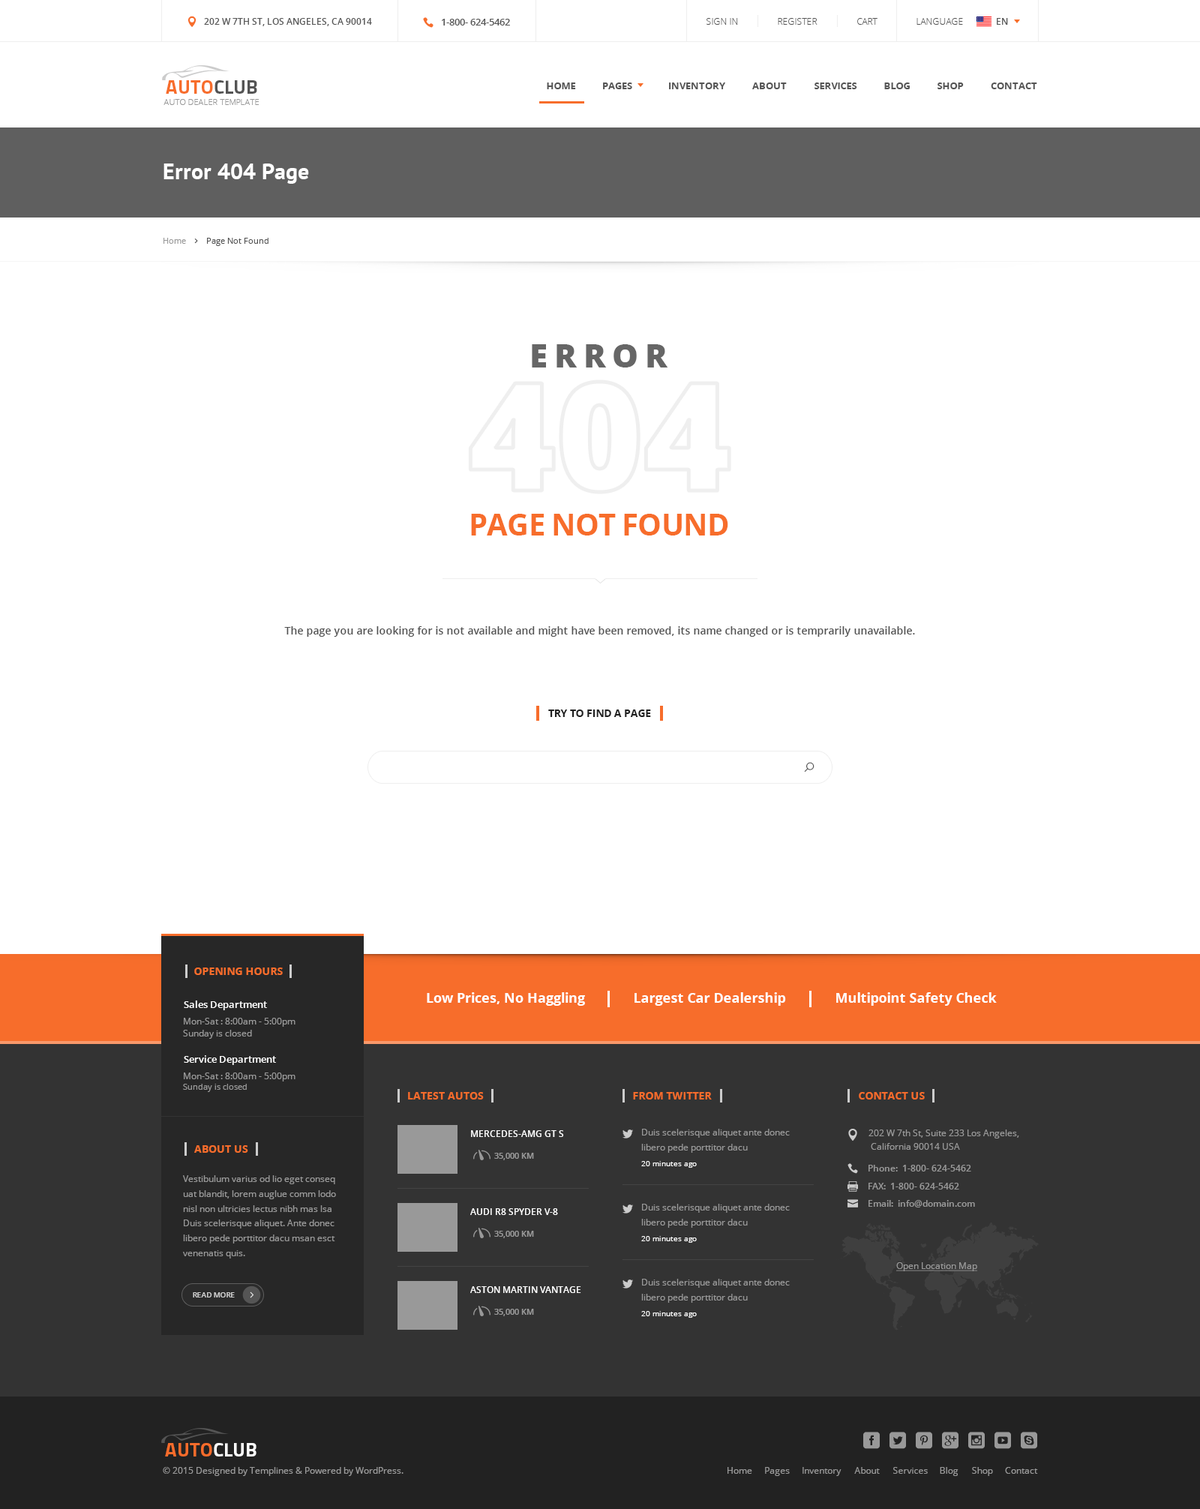
<style>
.page{position:relative;width:1200px;height:1509px;background:#ffffff}
.page>*{position:absolute;margin:0}
.t1{font:9px "OpenSans-Semibold";color:#555555}
.t2{font:9.8px "OpenSans-Semibold";color:#555555}
.t3{font:9px "OpenSans-Light";color:#555555}
.t4{font:19.5px "Titillium-Bold";color:#f76d2b}
.t5{font:19.5px "Titillium-Bold";color:#545454}
.t6{font:9.8px "OpenSans-Bold";color:#555555}
.t7{font:8.2px "OpenSans-Light";color:#999999}
.t8{font:22.5px "PTSans-Bold";color:#ffffff}
.t9{font:8.2px "OpenSans";color:#999999}
.t10{font:8.2px "OpenSans";color:#535353}
.t11{font:33px "OpenSans-Extrabold";letter-spacing:0.2em;color:#666666}
.t12{font:30px "OpenSans-Bold";letter-spacing:-0.022em;color:#f76d2b}
.t13{font:10.5px "OpenSans-Semibold";color:#525252}
.t14{font:10.5px "OpenSans-Bold";letter-spacing:-0.02em;color:#202020;text-transform:uppercase}
.t15{font:10.5px "OpenSans-Bold";color:#f76d2b}
.t16{font:9.8px "OpenSans-Semibold";color:#ffffff}
.t17{font:13.5px "OpenSans-Bold";color:#ffffff}
.t18{font:9px/11.7px "OpenSans";color:#999999}
.t19{font:8.2px/10.7px "OpenSans";color:#999999}
.t20{font:10.5px "OpenSans-Bold";color:#f76c2b}
.t21{font:10.5px "OpenSans-Bold";color:#f76c2b;text-transform:uppercase}
.t22{font:9px "OpenSans-Semibold";color:#ffffff}
.t23{font:9px/14.9px "OpenSans";color:#999999}
.t24{font:9px/13.5px "OpenSans";color:#999999}
.t25{font:8.2px "OpenSans-Semibold";color:#999999}
.t26{font:7.5px "OpenSans";color:#fefefe}
.t27{font:9px "OpenSans-Semibold";color:#999999}
.t28{font:9px "OpenSans";color:#999999;text-decoration:underline}
.t29{font:7.5px "OpenSans-Semibold";letter-spacing:-0.02em;color:#cccccc}
.t30{font:19.5px "Titillium-Bold";color:#f76c2b}
.t31{font:19.5px "Titillium-Bold";color:#ffffff}
.t32{font:9px "OpenSans";color:#999999}
</style>
<div class="page">
<p class="t1" style="left:204px;top:18px;width:168px;height:8px">202 W 7TH ST, LOS ANGELES, CA 90014</p>
<p class="t2" style="left:442px;top:19px;width:68px;height:7px">1-800- 624-5462</p>
<p class="t3" style="left:706px;top:18px;width:32px;height:7px">SIGN IN</p>
<p class="t3" style="left:778px;top:18px;width:40px;height:7px">REGISTER</p>
<p class="t3" style="left:857px;top:18px;width:21px;height:7px">CART</p>
<p class="t3" style="left:916px;top:18px;width:47px;height:7px">LANGUAGE</p>
<p class="t1" style="left:997px;top:18px;width:11px;height:7px">EN</p>
<p class="t4" style="left:166px;top:80px;width:91px;height:14px">AUTO<span class="t5">CLUB</span></p>
<p class="t6" style="left:547px;top:82px;width:29px;height:7px">HOME</p>
<p class="t6" style="left:603px;top:82px;width:29px;height:7px">PAGES</p>
<p class="t6" style="left:669px;top:82px;width:56px;height:7px">INVENTORY</p>
<p class="t6" style="left:752px;top:82px;width:35px;height:7px">ABOUT</p>
<p class="t6" style="left:814px;top:82px;width:43px;height:7px">SERVICES</p>
<p class="t6" style="left:884px;top:82px;width:26px;height:7px">BLOG</p>
<p class="t6" style="left:938px;top:82px;width:26px;height:7px">SHOP</p>
<p class="t6" style="left:991px;top:82px;width:46px;height:7px">CONTACT</p>
<p class="t7" style="left:164px;top:99px;width:95px;height:6px">AUTO DEALER TEMPLATE</p>
<p class="t8" style="left:164px;top:164px;width:145px;height:20px">Error 404 Page</p>
<p class="t9" style="left:164px;top:238px;width:22px;height:6px">Home</p>
<p class="t10" style="left:207px;top:238px;width:61px;height:8px">Page Not Found</p>
<p class="t11" style="left:532px;top:344px;width:136px;height:24px">ERROR</p>
<p class="t12" style="left:471px;top:514px;width:257px;height:22px">PAGE NOT FOUND</p>
<p class="t13" style="left:284px;top:626px;width:631px;height:11px">The page you are looking for is not available and might have been removed, its name changed or is temprarily unavailable.</p>
<p class="t14" style="left:548px;top:710px;width:103px;height:7px">TRY to finD a page</p>
<p class="t15" style="left:194px;top:968px;width:89px;height:7px">OPENING HOURS</p>
<p class="t16" style="left:184px;top:1000px;width:83px;height:10px">Sales Department</p>
<p class="t17" style="left:427px;top:992px;width:158px;height:14px">Low Prices, No Haggling</p>
<p class="t17" style="left:634px;top:992px;width:152px;height:14px">Largest Car Dealership</p>
<p class="t17" style="left:836px;top:992px;width:161px;height:14px">Multipoint Safety Check</p>
<p class="t18" style="left:183px;top:1018px;width:113px;height:21px">Mon-Sat : 8:00am - 5:00pm<br>Sunday is closed</p>
<p class="t16" style="left:184px;top:1055px;width:92px;height:10px">Service Department</p>
<p class="t18" style="left:183px;top:1072px;width:113px;height:20px">Mon-Sat : 8:00am - 5:00pm<br><span class="t19">Sunday is closed</span></p>
<p class="t20" style="left:408px;top:1092px;width:76px;height:8px">LATEST AUTOS</p>
<p class="t21" style="left:633px;top:1092px;width:79px;height:8px">from twitter</p>
<p class="t20" style="left:859px;top:1092px;width:66px;height:8px">CONTACT US</p>
<p class="t22" style="left:471px;top:1130px;width:93px;height:7px">MERCEDES-AMG GT S</p>
<p class="t23" style="left:641px;top:1129px;width:149px;height:24px">Duis scelerisque aliquet ante donec <br>libero pede porttitor dacu</p>
<p class="t24" style="left:868px;top:1130px;width:151px;height:20px">202 W 7th St, Suite 233 Los Angeles,<br> California 90014 USA</p>
<p class="t15" style="left:194px;top:1145px;width:54px;height:8px">ABOUT US</p>
<p class="t25" style="left:494px;top:1153px;width:40px;height:7px">35,000 KM</p>
<p class="t26" style="left:641px;top:1161px;width:56px;height:7px">20 minutes ago</p>
<p class="t27" style="left:868px;top:1165px;width:103px;height:7px">Phone:  1-800- 624-5462</p>
<p class="t23" style="left:183px;top:1175px;width:153px;height:83px">Vestibulum varius od lio eget conseq<br>uat blandit, lorem auglue comm lodo <br>nisl non ultricies lectus nibh mas lsa <br>Duis scelerisque aliquet. Ante donec<br>libero pede porttitor dacu msan esct<br>venenatis quis.</p>
<p class="t27" style="left:868px;top:1183px;width:91px;height:7px">FAX:  1-800- 624-5462</p>
<p class="t23" style="left:641px;top:1204px;width:149px;height:24px">Duis scelerisque aliquet ante donec <br>libero pede porttitor dacu</p>
<p class="t27" style="left:868px;top:1200px;width:107px;height:8px">Email:  info@domain.com</p>
<p class="t22" style="left:470px;top:1208px;width:88px;height:7px">AUDI R8 SPYDER V-8</p>
<p class="t25" style="left:494px;top:1231px;width:40px;height:7px">35,000 KM</p>
<p class="t26" style="left:641px;top:1236px;width:56px;height:7px">20 minutes ago</p>
<p class="t28" style="left:896px;top:1262px;width:81px;height:9px">Open Location Map</p>
<p class="t22" style="left:470px;top:1286px;width:111px;height:7px">ASTON MARTIN VANTAGE</p>
<p class="t23" style="left:641px;top:1279px;width:149px;height:24px">Duis scelerisque aliquet ante donec <br>libero pede porttitor dacu</p>
<p class="t29" style="left:193px;top:1292px;width:42px;height:6px">READ MORE</p>
<p class="t25" style="left:494px;top:1309px;width:40px;height:7px">35,000 KM</p>
<p class="t26" style="left:641px;top:1311px;width:56px;height:7px">20 minutes ago</p>
<p class="t30" style="left:165px;top:1443px;width:91px;height:13px">AUTO<span class="t31">CLUB</span></p>
<p class="t32" style="left:163px;top:1467px;width:241px;height:9px">© 2015 Designed by Templines &amp; Powered by WordPress.</p>
<p class="t32" style="left:728px;top:1467px;width:24px;height:7px">Home</p>
<p class="t32" style="left:765px;top:1467px;width:25px;height:9px">Pages</p>
<p class="t32" style="left:802px;top:1467px;width:40px;height:9px">Inventory</p>
<p class="t32" style="left:854px;top:1467px;width:26px;height:7px">About</p>
<p class="t32" style="left:893px;top:1467px;width:35px;height:7px">Services</p>
<p class="t32" style="left:940px;top:1467px;width:18px;height:9px">Blog</p>
<p class="t32" style="left:972px;top:1467px;width:21px;height:9px">Shop</p>
<p class="t32" style="left:1005px;top:1467px;width:33px;height:7px">Contact</p>
</div>
